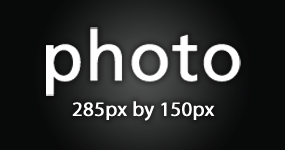
<style>
.page{position:relative;width:285px;height:150px;background:#080909}
.page>*{position:absolute;margin:0}
.t1{font:68.4px "FrutigerLT-Roman";color:#ffffff;font-weight:bold}
.t2{font:20.5px "MyriadPro-Regular";color:#ffffff;font-weight:bold}
</style>
<div class="page">
<p class="t1" style="left:46px;top:27px;width:195px;height:69px">photo</p>
<p class="t2" style="left:72px;top:101px;width:143px;height:20px">285px by 150px</p>
</div>
